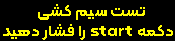
<style>
.page{position:relative;width:175px;height:41px;background:#000000}
.page>*{position:absolute;margin:0}
.t1{font:15.2px/20.8px "Kalameh-Bold";letter-spacing:0.01em;color:#fffc00;scale:1.12 1}
</style>
<div class="page">
<p class="t1" style="left:3px;top:4px;width:170px;height:36px">تست سیم کشی<br> دکمه start را فشار دهید</p>
</div>
